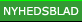
<style>
.page{position:relative;width:82px;height:22px;background:#339933}
.page>*{position:absolute;margin:0}
.t1{font:11px "Verdana";color:#ffffff}
</style>
<div class="page">
<p class="t1" style="left:4px;top:6px;width:75px;height:10px">NYHEDSBLAD</p>
</div>
